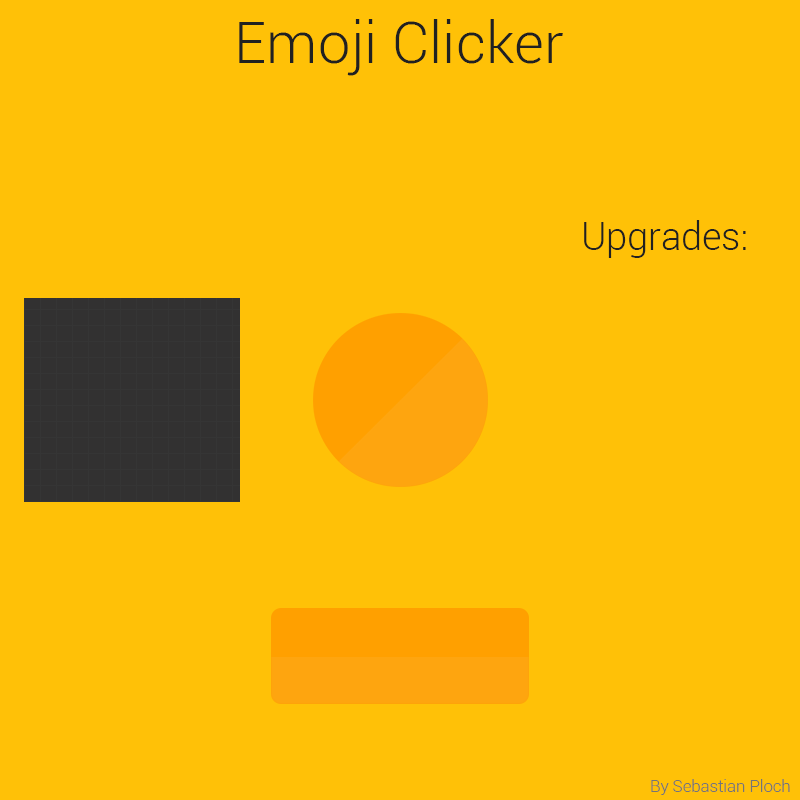
<style>
.page{position:relative;width:800px;height:800px;background:#ffc107}
.page>*{position:absolute;margin:0}
.t1{font:58.3px "Roboto-Light";color:#212121}
.t2{font:37.5px "Roboto-Light";color:#212121}
.t3{font:16.7px "Roboto-Light";color:#757575}
</style>
<div class="page">
<p class="t1" style="left:239px;top:19px;width:324px;height:57px">Emoji Clicker</p>
<p class="t2" style="left:584px;top:220px;width:162px;height:38px">Upgrades:</p>
<p class="t3" style="left:651px;top:779px;width:139px;height:16px">By Sebastian Ploch</p>
</div>
